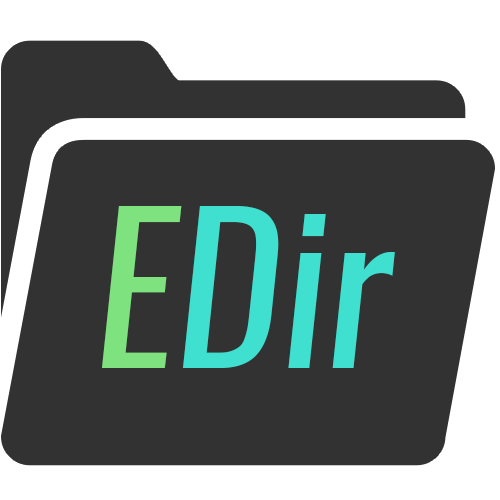
<style>
.page{position:relative;width:500px;height:500px;background:#323232}
.page>*{position:absolute;margin:0}
.t1{font:200px "Oswald-RegularItalic";color:#40e0d0}
.t2{font:200px "Oswald-RegularItalic";color:#7ee27e}
</style>
<div class="page">
<p class="t1" style="left:102px;top:206px;width:293px;height:162px"><span class="t2">E</span>Dir</p>
</div>
